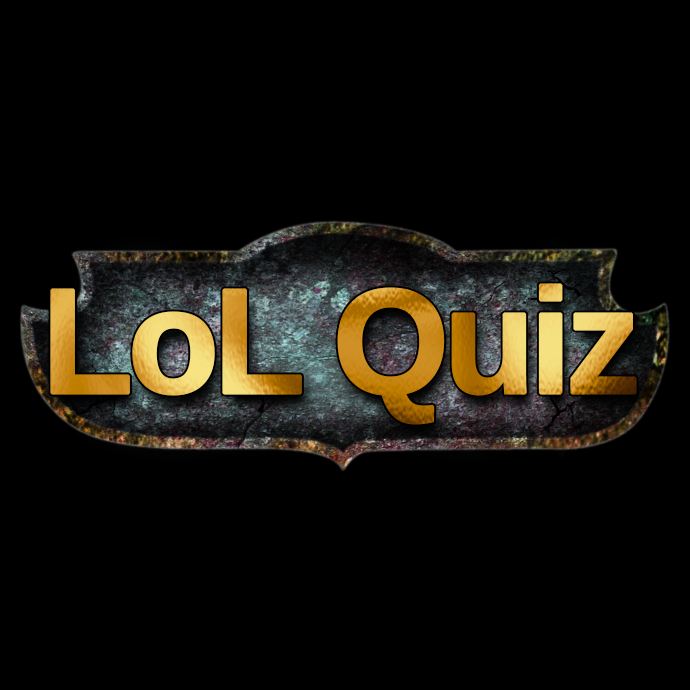
<style>
.page{position:relative;width:690px;height:690px;background:#000000}
.page>*{position:absolute;margin:0}
.t1{font:148.7px "LiberationSans-Bold";letter-spacing:-0.06em;font-weight:bold}
</style>
<div class="page">
<p class="t1" style="left:50px;top:283px;width:587px;height:142px">LoL Quiz</p>
</div>
